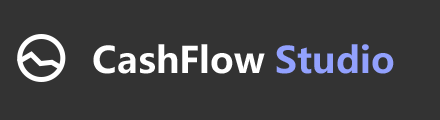
<style>
.page{position:relative;width:440px;height:120px;background:#333333}
.page>*{position:absolute;margin:0}
.t1{font:36px "MicrosoftYaHei-Bold";color:#ffffff}
.t2{font:36px "MicrosoftYaHei-Bold";color:#92a1fe}
</style>
<div class="page">
<p class="t1" style="left:93px;top:44px;width:301px;height:30px">CashFlow <span class="t2">Studio</span></p>
</div>
